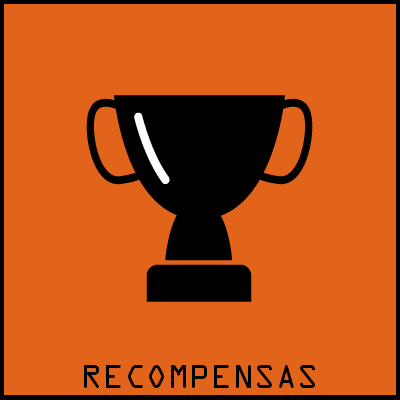
<style>
.page{position:relative;width:400px;height:400px;background:#e2641a}
.page>*{position:absolute;margin:0}
.t1{font:30px "OCRAStd";color:#000000}
</style>
<div class="page">
<p class="t1" style="left:84px;top:365px;width:231px;height:23px">RECOMPENSAS</p>
</div>
